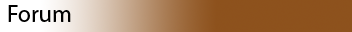
<style>
.page{position:relative;width:352px;height:32px}
.page>*{position:absolute;margin:0}
.t1{font:24px "MyriadPro-Regular";color:#000000}
</style>
<div class="page">
<p class="t1" style="left:8px;top:5px;width:63px;height:17px">Forum</p>
</div>
